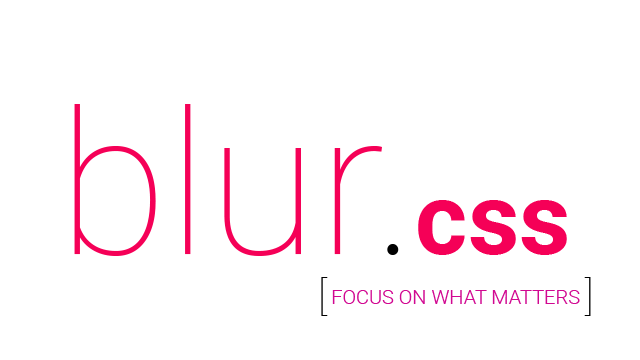
<style>
.page{position:relative;width:640px;height:360px;background:#ffffff}
.page>*{position:absolute;margin:0}
.t1{font:200px "Roboto-Thin";color:#f50057}
.t2{font:200px "Roboto-Thin";color:#000000}
.t3{font:100px "Roboto-Bold";color:#f50057}
.t4{font:40px "Roboto-Thin";color:#000000}
.t5{font:20px "Roboto-Light";color:#d10891}
</style>
<div class="page">
<p class="t1" style="left:74px;top:104px;width:493px;height:152px">blur<span class="t2">.</span><span class="t3">css</span></p>
<p class="t4" style="left:321px;top:277px;width:270px;height:39px">[                           ]</p>
<p class="t5" style="left:332px;top:290px;width:248px;height:14px">FOCUS ON WHAT MATTERS</p>
</div>
